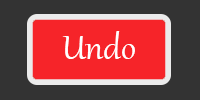
<style>
.page{position:relative;width:200px;height:100px;background:#333333}
.page>*{position:absolute;margin:0}
.t1{font:41.7px "Gabriola";color:#ffffff}
</style>
<div class="page">
<p class="t1" style="left:62px;top:31px;width:73px;height:28px">Undo</p>
</div>
